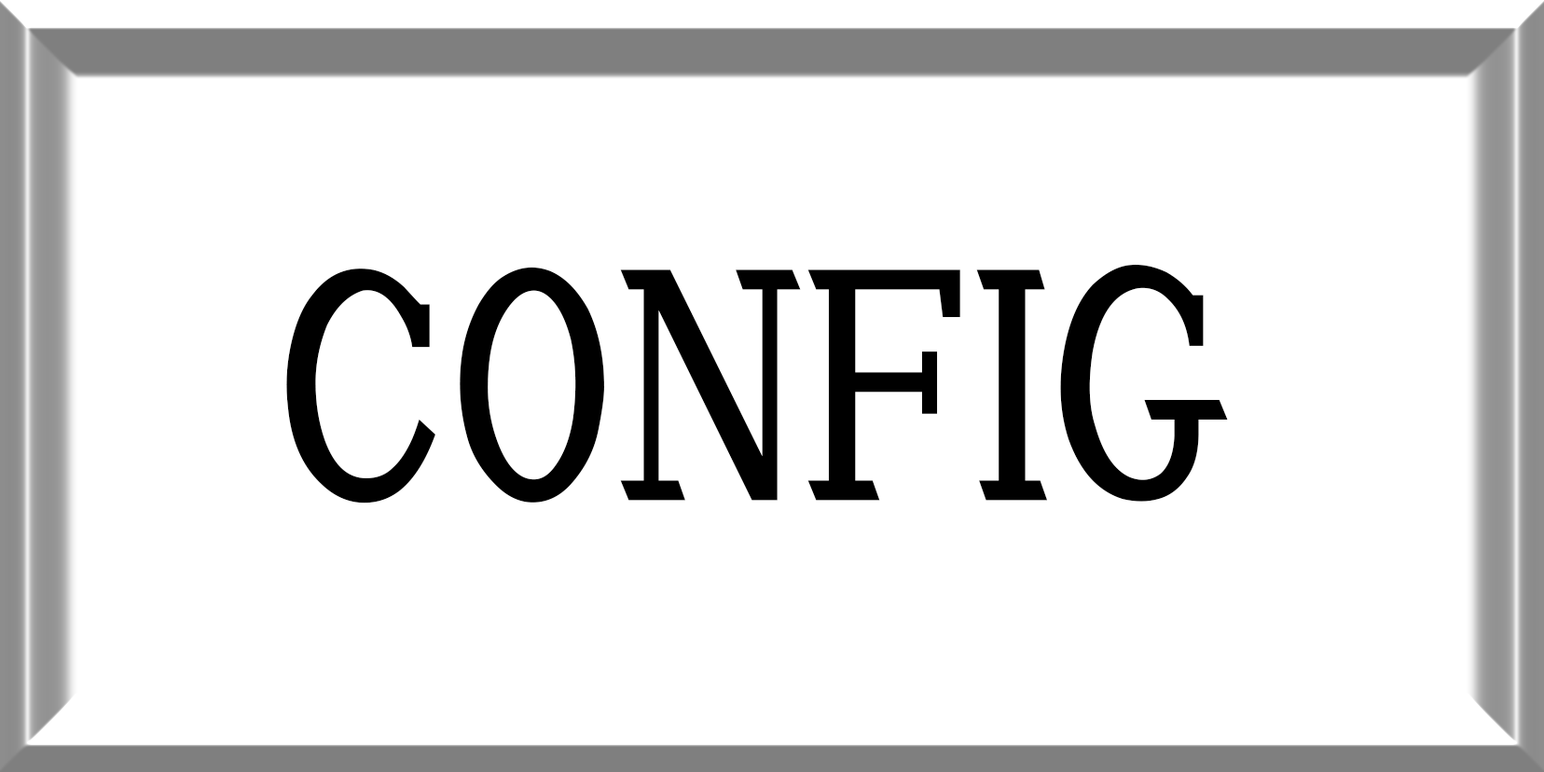
<style>
.page{position:relative;width:1544px;height:772px;background:#ffffff}
.page>*{position:absolute;margin:0}
.t1{font:294.8px "HGSSoeiPresenceEB";color:#000000}
</style>
<div class="page">
<p class="t1" style="left:286px;top:264px;width:942px;height:240px">CONFIG</p>
</div>
